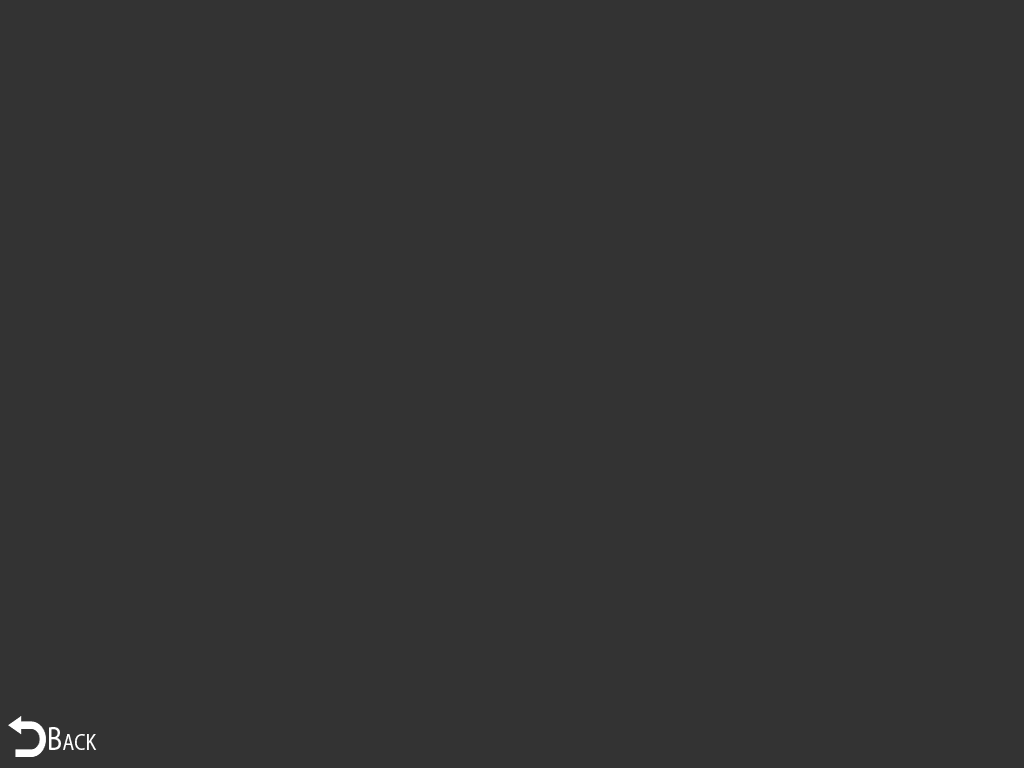
<style>
.page{position:relative;width:1024px;height:768px;background:#333333}
.page>*{position:absolute;margin:0}
.t1{font:33.3px "MyriadPro-Regular";letter-spacing:0.01em;color:#ffffff;font-variant:small-caps;scale:0.82 1}
</style>
<div class="page">
<p class="t1" style="left:49px;top:727px;width:48px;height:23px">Back</p>
</div>
